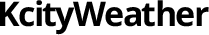
<style>
.page{position:relative;width:209px;height:35px;background:#ffffff}
.page>*{position:absolute;margin:0}
.t1{font:34px "OpenSans-Bold";letter-spacing:-0.05em;color:#000000}
</style>
<div class="page">
<p class="t1" style="left:0px;top:0px;width:209px;height:35px">KcityWeather</p>
</div>
